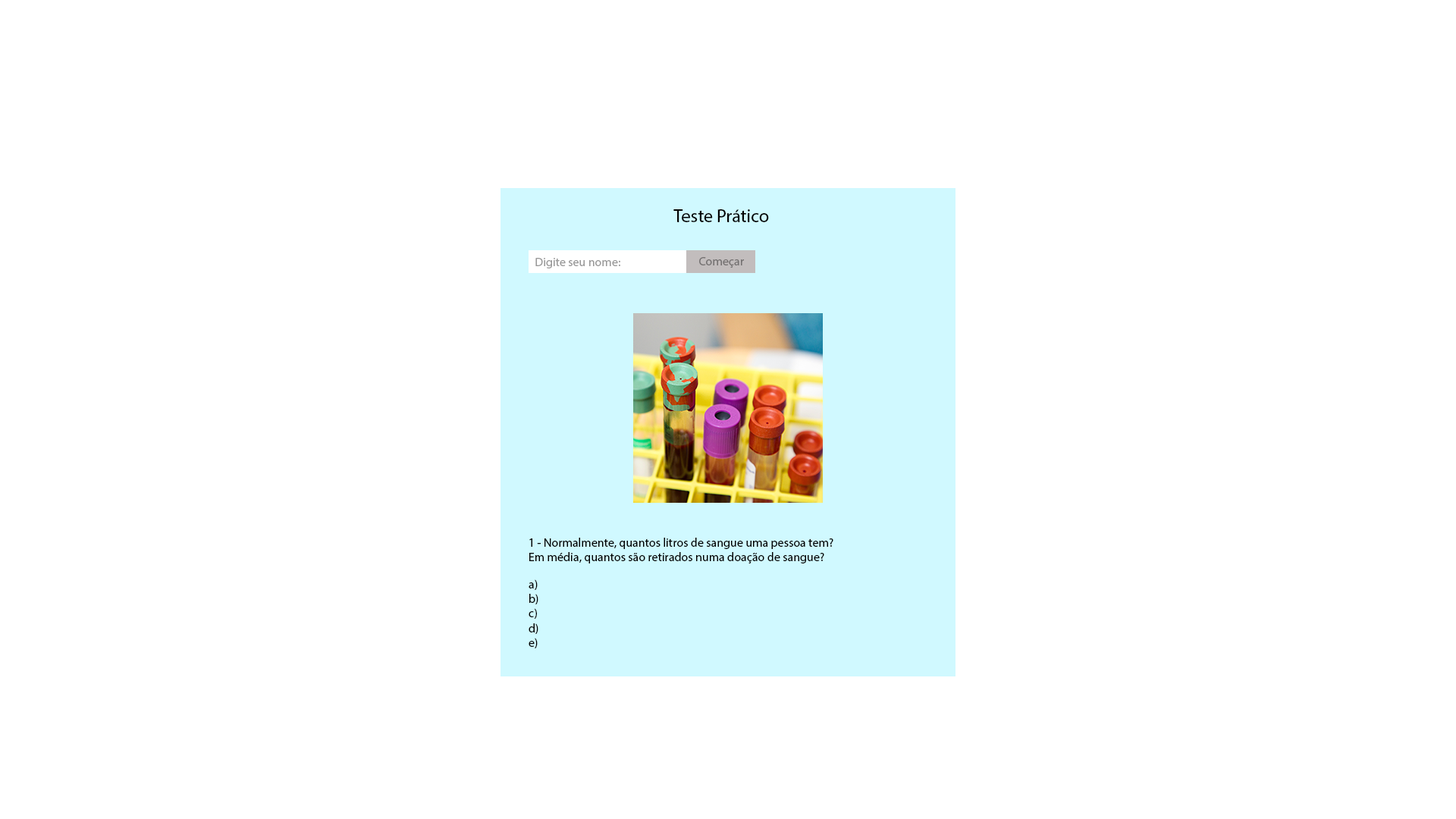
<style>
.page{position:relative;width:1456px;height:819px;background:#ffffff}
.page>*{position:absolute;margin:0}
.t1{font:18.2px "MyriadPro-Regular";color:#000000}
.t2{font:12.1px "MyriadPro-Regular";color:#999999}
.t3{font:12.1px "MyriadPro-Regular";color:#747171}
.t4{font:12.1px "MyriadPro-Regular";color:#000000}
</style>
<div class="page">
<p class="t1" style="left:673px;top:209px;width:96px;height:13px">Teste Prático</p>
<p class="t2" style="left:535px;top:258px;width:85px;height:10px">Digite seu nome:</p>
<p class="t3" style="left:699px;top:257px;width:45px;height:11px">Começar</p>
<p class="t4" style="left:529px;top:538px;width:304px;height:25px">1 - Normalmente, quantos litros de sangue uma pessoa tem? <br>Em média, quantos são retirados numa doação de sangue?</p>
<p class="t4" style="left:529px;top:579px;width:9px;height:69px">a)<br>b)<br>c)<br>d)<br>e)</p>
</div>
